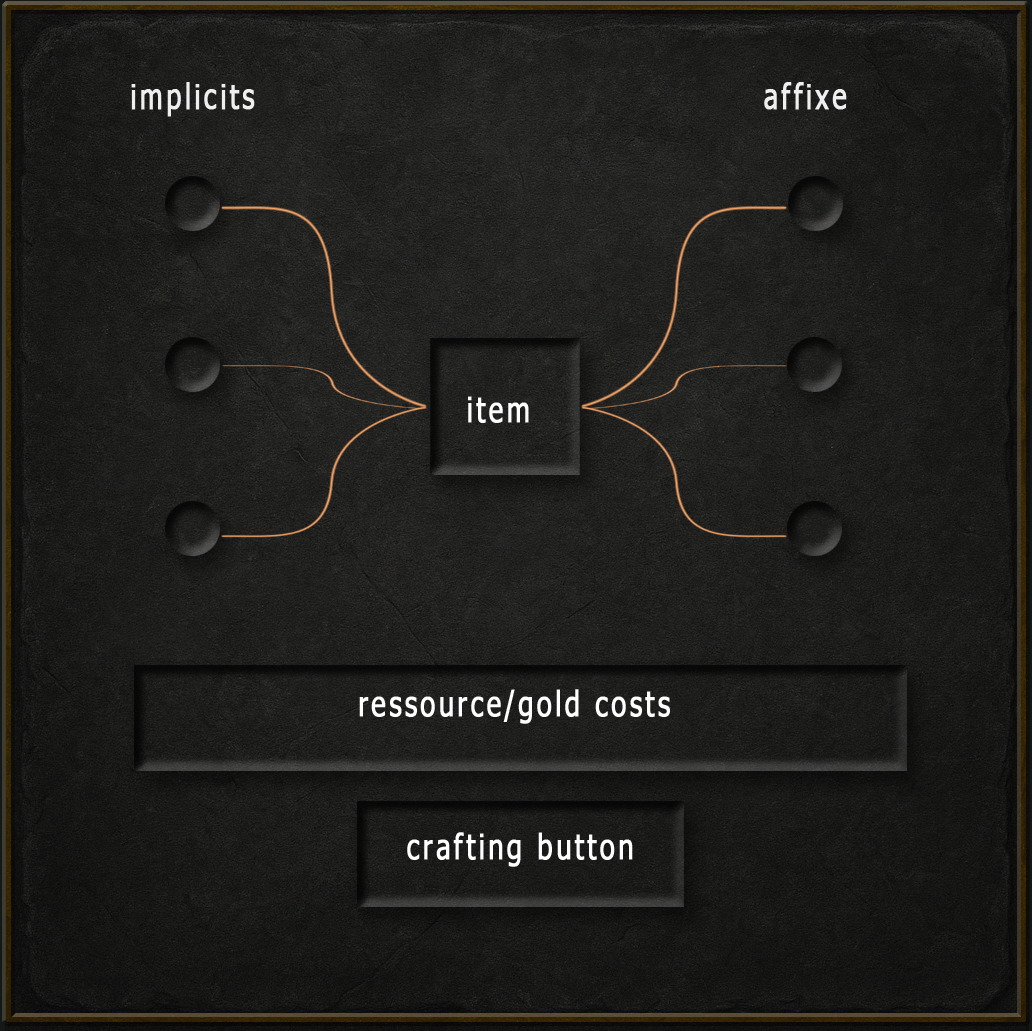
<style>
.page{position:relative;width:1032px;height:1031px}
.page>*{position:absolute;margin:0}
.t1{font:35px "Tahoma";letter-spacing:0.1em;color:#efefef;font-weight:bold;scale:0.78 1}
.t2{font:35px "Tahoma";letter-spacing:0.1em;color:#ffffff;font-weight:bold;scale:0.78 1}
</style>
<div class="page">
<p class="t1" style="left:131px;top:82px;width:124px;height:35px">implicits</p>
<p class="t1" style="left:764px;top:82px;width:83px;height:28px">affixe</p>
<p class="t2" style="left:468px;top:396px;width:61px;height:27px">item</p>
<p class="t2" style="left:359px;top:689px;width:311px;height:35px">ressource/gold costs</p>
<p class="t2" style="left:407px;top:832px;width:226px;height:35px">crafting button</p>
</div>
